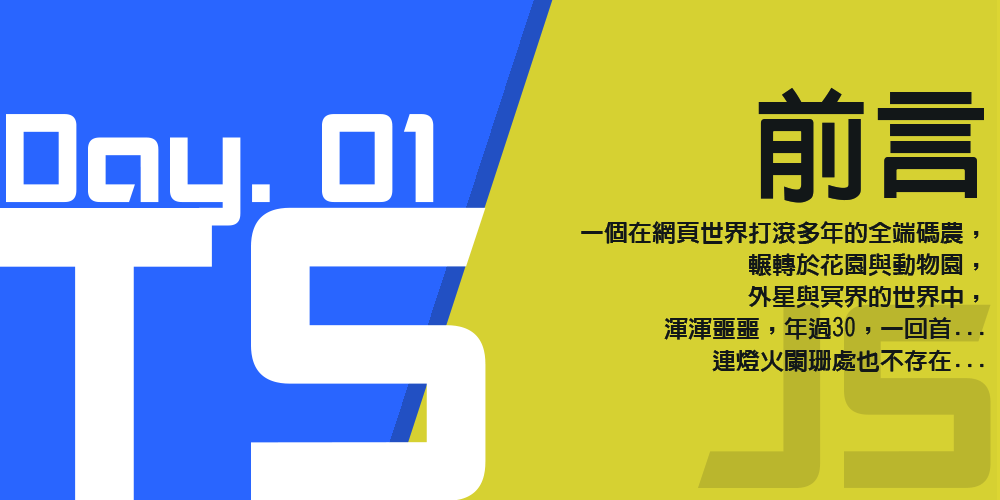
<style>
.page{position:relative;width:1000px;height:500px;background:#d6d132}
.page>*{position:absolute;margin:0}
.t1{font:120px "linGothic-Extra";color:#121718}
.t2{font:120px "Akashi";color:#ffffff}
.t3{font:24px/32px "linGothic-Extra";color:#121718}
</style>
<div class="page">
<p class="t1" style="left:758px;top:87px;width:226px;height:116px">前言</p>
<p class="t2" style="left:6px;top:114px;width:428px;height:112px">Day. 01</p>
<p class="t3" style="left:581px;top:221px;width:403px;height:151px;text-align:right">一個在網頁世界打滾多年的全端碼農，<br>輾轉於花園與動物園，<br>外星與冥界的世界中，<br>渾渾噩噩，年過30，一回首...<br>連燈火闌珊處也不存在...</p>
</div>
